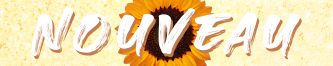
<style>
.page{position:relative;width:333px;height:66px}
.page>*{position:absolute;margin:0}
.t1{font:84.7px "Heaters";letter-spacing:0.05em;color:#ffffff;scale:1.24 1}
</style>
<div class="page">
<p class="t1" style="left:31px;top:7px;width:269px;height:50px">nouveau</p>
</div>
